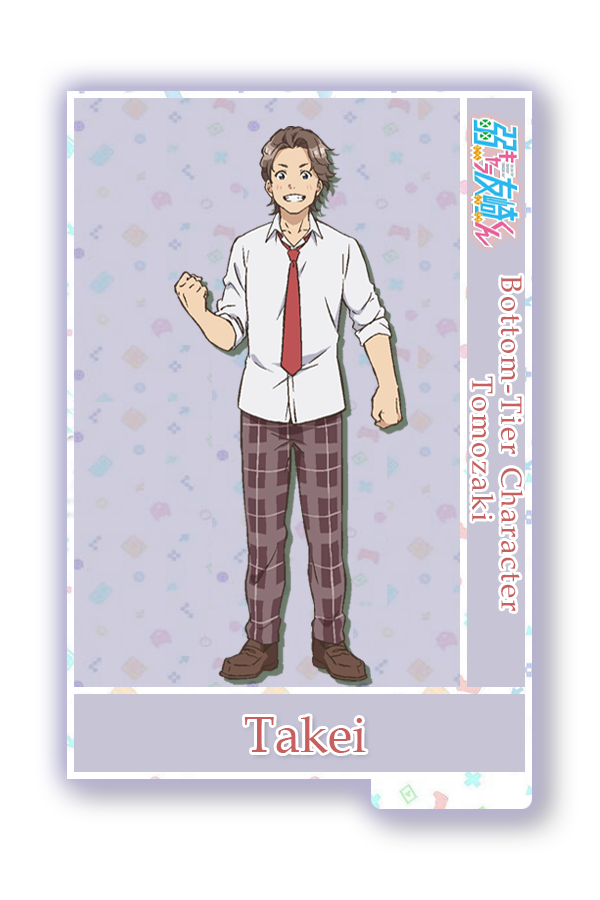
<style>
.page{position:relative;width:600px;height:900px;background:#ffffff}
.page>*{position:absolute;margin:0}
.t1{font:29.2px/29.2px "BookAntiqua";letter-spacing:0.08em;color:#c65f5d}
.t2{font:50px "BookAntiqua";color:#c65f5d}
</style>
<div class="page">
<p class="t1" style="left:471px;top:275px;width:52px;height:336px;text-align:center;rotate:90deg">Bottom-Tier Character <br>Tomozaki</p>
<p class="t2" style="left:244px;top:716px;width:122px;height:37px">Takei</p>
</div>
